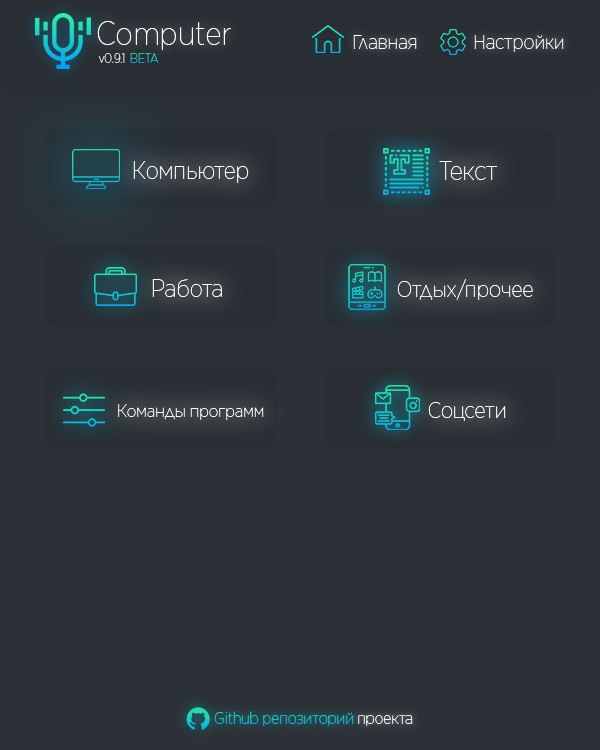
<style>
.page{position:relative;width:600px;height:750px;background:#2b3136}
.page>*{position:absolute;margin:0}
.t1{font:33.6px "GothamNarrow-Thin";letter-spacing:-0.01em;color:#ffffff}
.t2{font:20.1px "GothamNarrow-Thin";letter-spacing:-0.01em;color:#ffffff}
.t3{font:13.1px "GothamNarrow-Thin";letter-spacing:-0.01em}
.t4{font:24.7px "GothamNarrow-Thin";letter-spacing:-0.01em;color:#ffffff}
.t5{font:26.7px "GothamNarrow-Thin";letter-spacing:-0.01em;color:#ffffff}
.t6{font:22.6px "GothamNarrow-Thin";letter-spacing:-0.01em;color:#ffffff}
.t7{font:17.9px "GothamNarrow-Thin";letter-spacing:-0.01em;color:#ffffff}
.t8{font:16.3px "GothamNarrow-Thin";letter-spacing:-0.01em;color:#13c6d1}
.t9{font:16.3px "GothamNarrow-Thin";letter-spacing:-0.01em;color:#ffffff}
</style>
<div class="page">
<p class="t1" style="left:97px;top:21px;width:134px;height:29px">Computer</p>
<p class="t2" style="left:353px;top:35px;width:64px;height:14px">Главная</p>
<p class="t2" style="left:474px;top:35px;width:90px;height:17px">Настройки</p>
<p class="t3" style="left:98px;top:53px;width:27px;height:10px">v0.9.1</p>
<p class="t3" style="left:130px;top:53px;width:29px;height:10px">BETA</p>
<p class="t4" style="left:133px;top:161px;width:116px;height:22px">Компьютер</p>
<p class="t5" style="left:439px;top:161px;width:59px;height:19px">Текст</p>
<p class="t4" style="left:152px;top:279px;width:70px;height:18px">Работа</p>
<p class="t6" style="left:397px;top:279px;width:136px;height:21px">Отдых/прочее</p>
<p class="t7" style="left:118px;top:404px;width:146px;height:16px">Команды программ</p>
<p class="t6" style="left:428px;top:402px;width:78px;height:19px">Соцсети</p>
<p class="t8" style="left:214px;top:711px;width:140px;height:15px">Github репозиторий</p>
<p class="t9" style="left:358px;top:715px;width:55px;height:11px">проекта</p>
</div>
